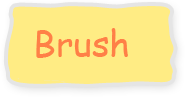
<style>
.page{position:relative;width:186px;height:98px;background:#ffec84}
.page>*{position:absolute;margin:0}
.t1{font:36px "ComicSansMS";color:#ff8047}
</style>
<div class="page">
<p class="t1" style="left:36px;top:28px;width:92px;height:30px">Brush</p>
</div>
